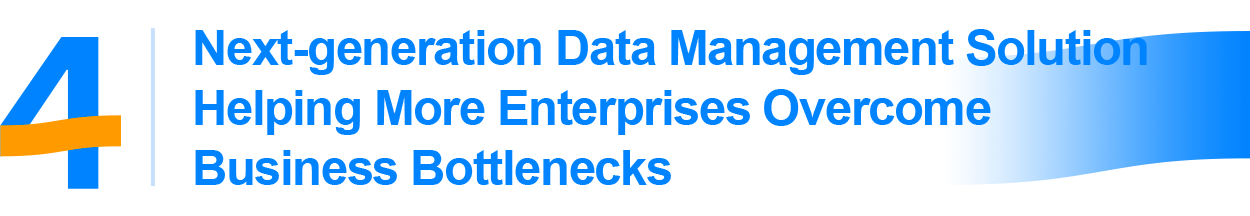
<style>
.page{position:relative;width:1250px;height:216px;background:#ffffff}
.page>*{position:absolute;margin:0}
.t1{font:49px/60px "Arial-BoldMT";letter-spacing:-0.03em;color:#0083ff}
</style>
<div class="page">
<p class="t1" style="left:195px;top:29px;width:952px;height:156px">Next-generation Data Management Solution<br>Helping More Enterprises Overcome Business Bottlenecks</p>
</div>
